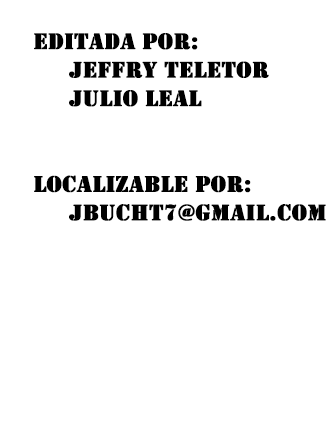
<style>
.page{position:relative;width:328px;height:423px;background:#ffffff}
.page>*{position:absolute;margin:0}
.t1{font:23.8px "Stencil";color:#000000;font-weight:bold}
</style>
<div class="page">
<p class="t1" style="left:34px;top:33px;width:292px;height:188px">EDITADA POR:<br> JEFFRY TELETOR<br> JULIO LEAL<br><br><br>LOCALIZABLE POR:<br> JBUCHT7@GMAIL.COM</p>
</div>
